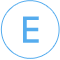
<style>
.page{position:relative;width:60px;height:60px;background:#ffffff}
.page>*{position:absolute;margin:0}
.t1{font:36px "Fugue-Regular";color:#55acee}
</style>
<div class="page">
<p class="t1" style="left:23px;top:16px;width:16px;height:27px">E</p>
</div>
